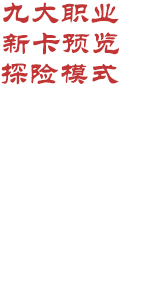
<style>
.page{position:relative;width:150px;height:300px;background:#ffffff}
.page>*{position:absolute;margin:0}
.t1{font:30px "STLiti";color:#c23535}
</style>
<div class="page">
<p class="t1" style="left:3px;top:2px;width:116px;height:22px">九大职业</p>
<p class="t1" style="left:3px;top:32px;width:116px;height:23px">新卡预览</p>
<p class="t1" style="left:1px;top:63px;width:118px;height:22px">探险模式</p>
</div>
